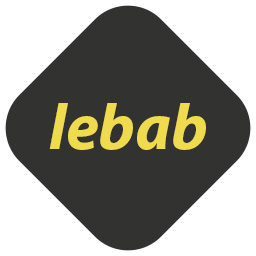
<style>
.page{position:relative;width:256px;height:256px;background:#323330}
.page>*{position:absolute;margin:0}
.t1{font:65.1px "MyriadPro-BoldIt";color:#f0db4f}
</style>
<div class="page">
<p class="t1" style="left:49px;top:103px;width:157px;height:47px">lebab</p>
</div>
